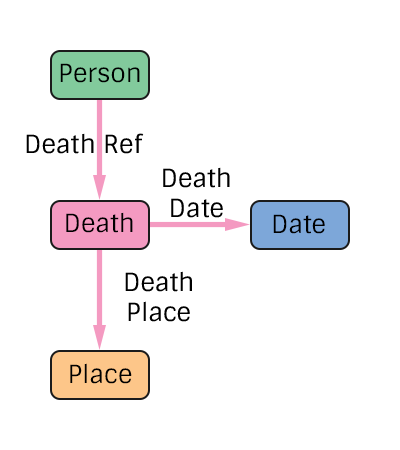
<style>
.page{position:relative;width:400px;height:450px;background:#ffffff}
.page>*{position:absolute;margin:0}
.t1{font:25px "Sintony";color:#000000}
</style>
<div class="page">
<p class="t1" style="left:60px;top:63px;width:80px;height:20px">Person</p>
<p class="t1" style="left:26px;top:133px;width:118px;height:21px">Death Ref</p>
<p class="t1" style="left:163px;top:167px;width:67px;height:51px;text-align:center">Death<br>Date</p>
<p class="t1" style="left:66px;top:212px;width:67px;height:21px">Death</p>
<p class="t1" style="left:273px;top:214px;width:52px;height:20px">Date</p>
<p class="t1" style="left:125px;top:271px;width:67px;height:51px;text-align:center">Death<br>Place</p>
<p class="t1" style="left:70px;top:363px;width:62px;height:21px">Place</p>
</div>
